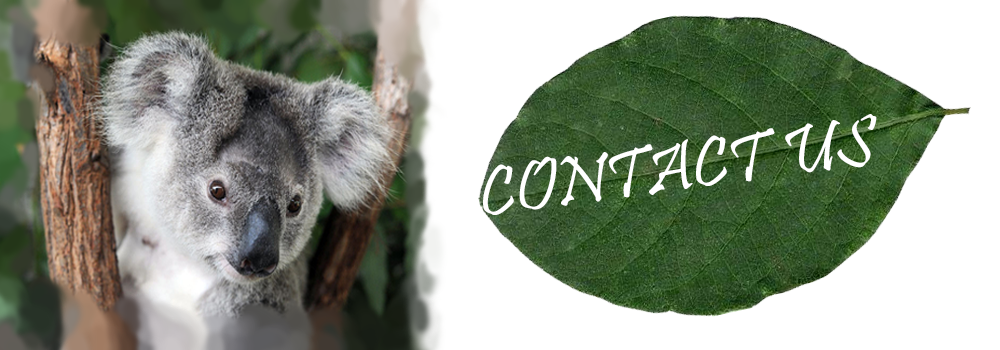
<style>
.page{position:relative;width:1000px;height:350px;background:#ffffff}
.page>*{position:absolute;margin:0}
.t1{font:72px "Pristina-Regular";color:#ffffff}
</style>
<div class="page">
<p class="t1" style="left:483px;top:114px;width:394px;height:101px;rotate:-8deg">CONTACT US</p>
</div>
